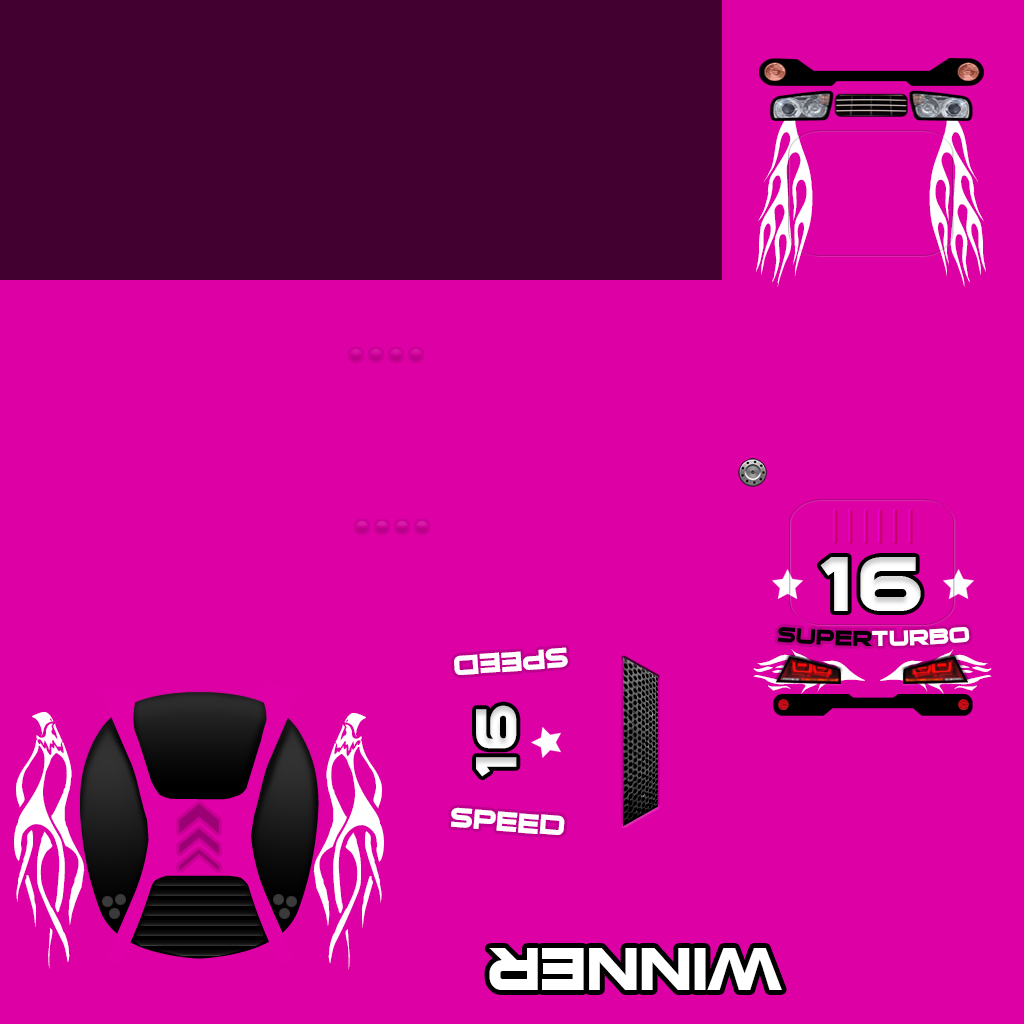
<style>
.page{position:relative;width:1024px;height:1024px;background:#dd00a5}
.page>*{position:absolute;margin:0}
.t1{font:89.2px "VehicleDecals'Flames&Art'";color:#ffffff;font-variant:small-caps;scale:0.86 1}
.t2{font:70.1px "SuiGenerisBold";letter-spacing:0.1em;color:#ffffff;font-variant:small-caps}
.t3{font:30px "SuiGenerisBold";color:#000000;font-variant:small-caps}
.t4{font:30px "SuiGenerisBold";color:#ffffff;font-variant:small-caps}
.t5{font:36.8px "SuiGenerisBold";color:#ffffff;font-variant:small-caps}
.t6{font:72px "VehicleDecals'Flames&Art'";font-variant:small-caps;scale:0.49 1}
.t7{font:79.7px "VehicleDecals'Flames&Art'";color:#ffffff;font-variant:small-caps;scale:0.8 1}
.t8{font:53.2px "SuiGenerisBold";letter-spacing:0.1em;color:#ffffff;font-variant:small-caps;scale:0.93 1}
.t9{font:78.7px "SuiGenerisBold";color:#ffffff;font-variant:small-caps}
</style>
<div class="page">
<p class="t1" style="left:756px;top:101px;width:57px;height:186px;rotate:90deg">c</p>
<p class="t1" style="left:929px;top:101px;width:57px;height:186px;rotate:90deg">c</p>
<p class="t2" style="left:820px;top:557px;width:101px;height:54px">16</p>
<p class="t3" style="left:777px;top:627px;width:193px;height:19px">super<span class="t4">turbo</span></p>
<p class="t5" style="left:454px;top:647px;width:114px;height:28px;rotate:176deg">speed</p>
<p class="t6" style="left:753px;top:649px;width:112px;height:45px;rotate:180deg">s</p>
<p class="t6" style="left:880px;top:649px;width:112px;height:45px">s</p>
<p class="t7" style="left:14px;top:712px;width:71px;height:257px;rotate:90deg">4</p>
<p class="t7" style="left:313px;top:713px;width:71px;height:257px;rotate:90deg">4</p>
<p class="t8" style="left:476px;top:705px;width:41px;height:72px;rotate:-90deg">16</p>
<p class="t5" style="left:451px;top:807px;width:114px;height:28px;rotate:5deg">speed</p>
<p class="t9" style="left:489px;top:948px;width:293px;height:42px;rotate:180deg">winner</p>
</div>
